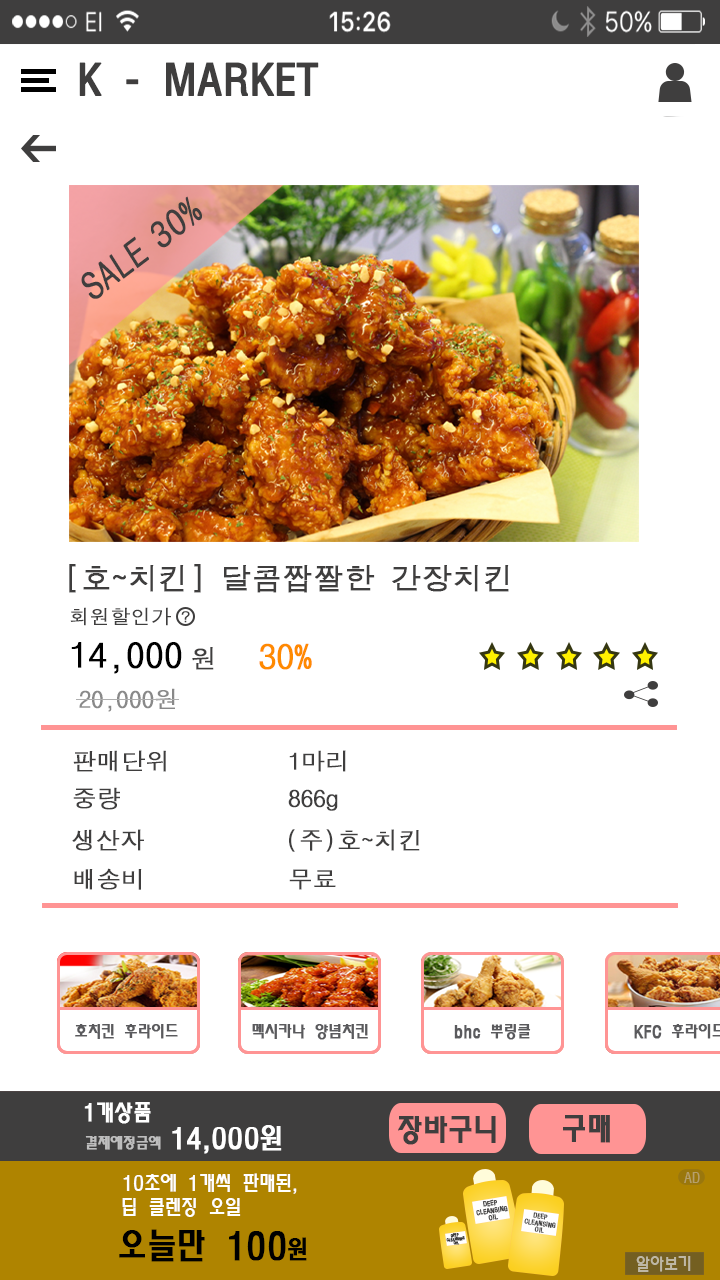
<style>
.page{position:relative;width:720px;height:1280px;background:#ffffff}
.page>*{position:absolute;margin:0}
.t1{font:40px "MoeumTR-HM";color:#3f3e3e;font-weight:bold}
.t2{font:36.2px "DotumChe";color:#3f3e3e;font-weight:bold;scale:0.97 1}
.t3{font:30px "DotumChe";color:#3f3e3e;font-weight:bold}
.t4{font:20px "DotumChe";color:#3f3e3e;font-weight:bold}
.t5{font:36px "DotumChe";color:#000000;font-weight:bold}
.t6{font:26px "DotumChe";color:#3f3e3e;font-weight:bold}
.t7{font:35px "DotumChe";color:#ff8a00;font-weight:bold}
.t8{font:24px "DotumChe";color:#898989;font-weight:bold}
.t9{font:24px "DotumChe";color:#3f3e3e;font-weight:bold}
.t10{font:16px "MoeumTR-HM";color:#5a5a5d;font-weight:bold}
.t11{font:22px "MoeumTR-HM";color:#ffffff;font-weight:bold}
.t12{font:30px "MoeumTR-HM";color:#3f3e3e;font-weight:bold}
.t13{font:28px "MoeumTR-HM";color:#ffffff;font-weight:bold}
.t14{font:15px "MoeumTR-HM";color:#bebebe;font-weight:bold}
.t15{font:20px "MoeumTR-HM";color:#ffffff}
.t16{font:13px "MoeumTR-HM";color:#b6a06b}
.t17{font:5.9px "MoeumTR-HM";color:#3f3e3e;font-weight:bold}
.t18{font:35px "MoeumTR-HM";color:#000000;font-weight:bold}
.t19{font:25px "MoeumTR-HM";color:#000000;font-weight:bold}
.t20{font:3.3px "MoeumTR-HM";color:#3f3e3e;font-weight:bold}
.t21{font:17px "MoeumTR-HM";color:#beb7a5}
</style>
<div class="page">
<p class="t1" style="left:79px;top:62px;width:240px;height:34px">K - MARKET</p>
<p class="t2" style="left:151px;top:196px;width:51px;height:52px;rotate:-37deg">30%</p>
<p class="t2" style="left:81px;top:236px;width:68px;height:63px;rotate:-37deg">SALE</p>
<p class="t3" style="left:69px;top:564px;width:440px;height:29px">[호~치킨] 달콤짭짤한 간장치킨</p>
<p class="t4" style="left:70px;top:607px;width:101px;height:19px">회원할인가</p>
<p class="t5" style="left:71px;top:642px;width:143px;height:32px">14,000 <span class="t6">원</span></p>
<p class="t7" style="left:259px;top:643px;width:53px;height:27px">30%</p>
<p class="t8" style="left:79px;top:688px;width:96px;height:24px">20,000원</p>
<p class="t9" style="left:73px;top:750px;width:273px;height:22px">판매단위    1마리</p>
<p class="t9" style="left:73px;top:787px;width:265px;height:24px">중량      866g</p>
<p class="t9" style="left:72px;top:829px;width:72px;height:22px">생산자</p>
<p class="t9" style="left:289px;top:829px;width:131px;height:23px">(주)호~치킨</p>
<p class="t9" style="left:74px;top:868px;width:262px;height:22px">배송비     무료</p>
<p class="t10" style="left:75px;top:1024px;width:103px;height:15px">호치킨 후라이드</p>
<p class="t10" style="left:252px;top:1024px;width:116px;height:16px">멕시카나 양념치킨</p>
<p class="t10" style="left:454px;top:1024px;width:77px;height:16px">bhc 뿌링클</p>
<p class="t11" style="left:84px;top:1102px;width:67px;height:22px">1개상품</p>
<p class="t12" style="left:398px;top:1116px;width:98px;height:29px">장바구니</p>
<p class="t12" style="left:563px;top:1115px;width:47px;height:28px">구매</p>
<p class="t13" style="left:85px;top:1125px;width:197px;height:29px"><span class="t14">결제예정금액 </span>14,000원</p>
<p class="t15" style="left:123px;top:1173px;width:174px;height:21px">10초에 1개씩 판매된,</p>
<p class="t16" style="left:684px;top:1172px;width:16px;height:11px">AD</p>
<p class="t15" style="left:122px;top:1198px;width:119px;height:19px">딥 클렌징 오일</p>
<p class="t17" style="left:476px;top:1205px;width:32px;height:11px;rotate:-9deg">CLEANSING</p>
<p class="t17" style="left:482px;top:1199px;width:15px;height:8px;rotate:-9deg">DEEP</p>
<p class="t17" style="left:488px;top:1214px;width:11px;height:7px;rotate:-9deg">OIL</p>
<p class="t17" style="left:533px;top:1212px;width:15px;height:8px;rotate:8deg">DEEP</p>
<p class="t18" style="left:119px;top:1229px;width:188px;height:33px">오늘만 100<span class="t19">원</span></p>
<p class="t17" style="left:524px;top:1218px;width:32px;height:10px;rotate:8deg">CLEANSING</p>
<p class="t17" style="left:534px;top:1226px;width:10px;height:7px;rotate:8deg">OIL</p>
<p class="t20" style="left:446px;top:1236px;width:19px;height:6px;rotate:-8deg">CLEANSING</p>
<p class="t20" style="left:450px;top:1233px;width:9px;height:5px;rotate:-8deg">DEEP</p>
<p class="t20" style="left:453px;top:1241px;width:7px;height:4px;rotate:-8deg">OIL</p>
<p class="t21" style="left:636px;top:1256px;width:55px;height:16px">알아보기</p>
</div>
